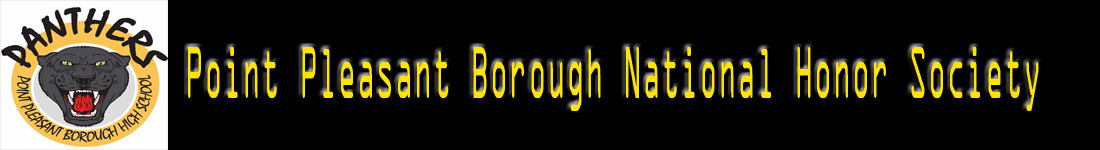
<style>
.page{position:relative;width:1100px;height:150px;background:#000000}
.page>*{position:absolute;margin:0}
.t1{font:66.2px "OCRAStd";color:#ffe400;scale:0.4 1}
</style>
<div class="page">
<p class="t1" style="left:188px;top:47px;width:851px;height:64px">Point Pleasant Borough National Honor Society</p>
</div>
